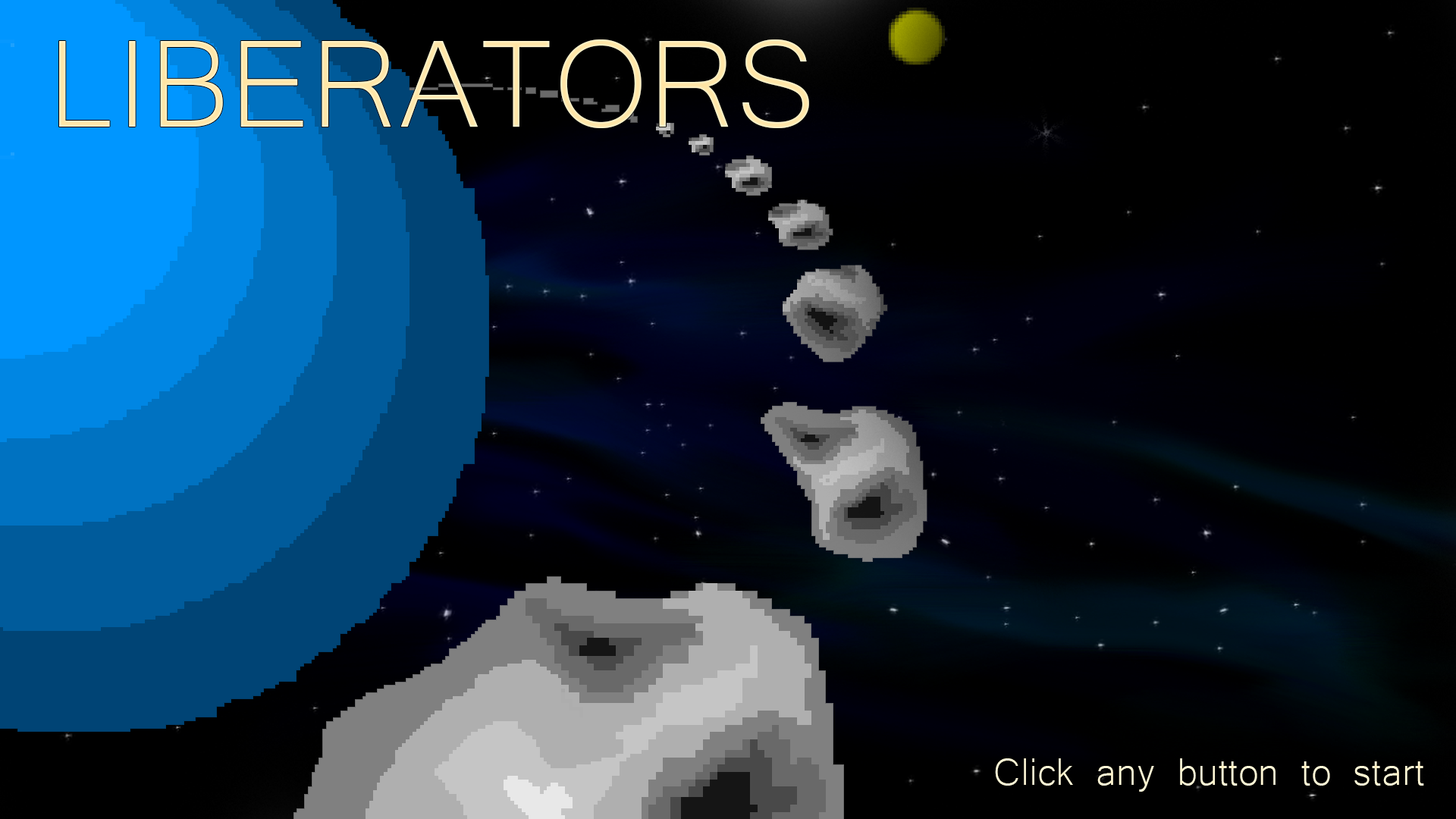
<style>
.page{position:relative;width:1456px;height:819px}
.page>*{position:absolute;margin:0}
.t1{font:159.9px "Microsoft-Yi-Baiti";color:#ffeab1}
.t2{font:49.3px "Microsoft-Yi-Baiti";color:#fff8d7}
</style>
<div class="page">
<p class="t1" style="left:59px;top:39px;width:750px;height:89px">LIBERATORS</p>
<p class="t2" style="left:995px;top:758px;width:429px;height:34px">Click any button to start</p>
</div>
